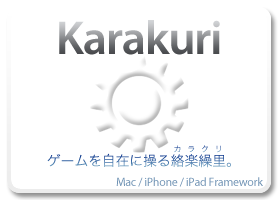
<style>
.page{position:relative;width:280px;height:200px;background:#ffffff}
.page>*{position:absolute;margin:0}
.t1{font:48px "MyriadPro-Semibold";letter-spacing:-0.025em}
.t2{font:8px "HiraKakuProN-W3";letter-spacing:0.75em}
.t3{font:14px "HiraKakuPro-W3";color:#4676ab}
.t4{font:12px "MyriadPro-Regular";letter-spacing:-0.025em;color:#7093b4}
</style>
<div class="page">
<p class="t1" style="left:59px;top:20px;width:161px;height:35px">Karakuri</p>
<p class="t2" style="left:174px;top:145px;width:47px;height:8px">カラクリ</p>
<p class="t3" style="left:47px;top:153px;width:184px;height:15px">ゲームを自在に操る絡楽繰里。</p>
<p class="t4" style="left:116px;top:177px;width:147px;height:10px">Mac / iPhone / iPad Framework</p>
</div>
